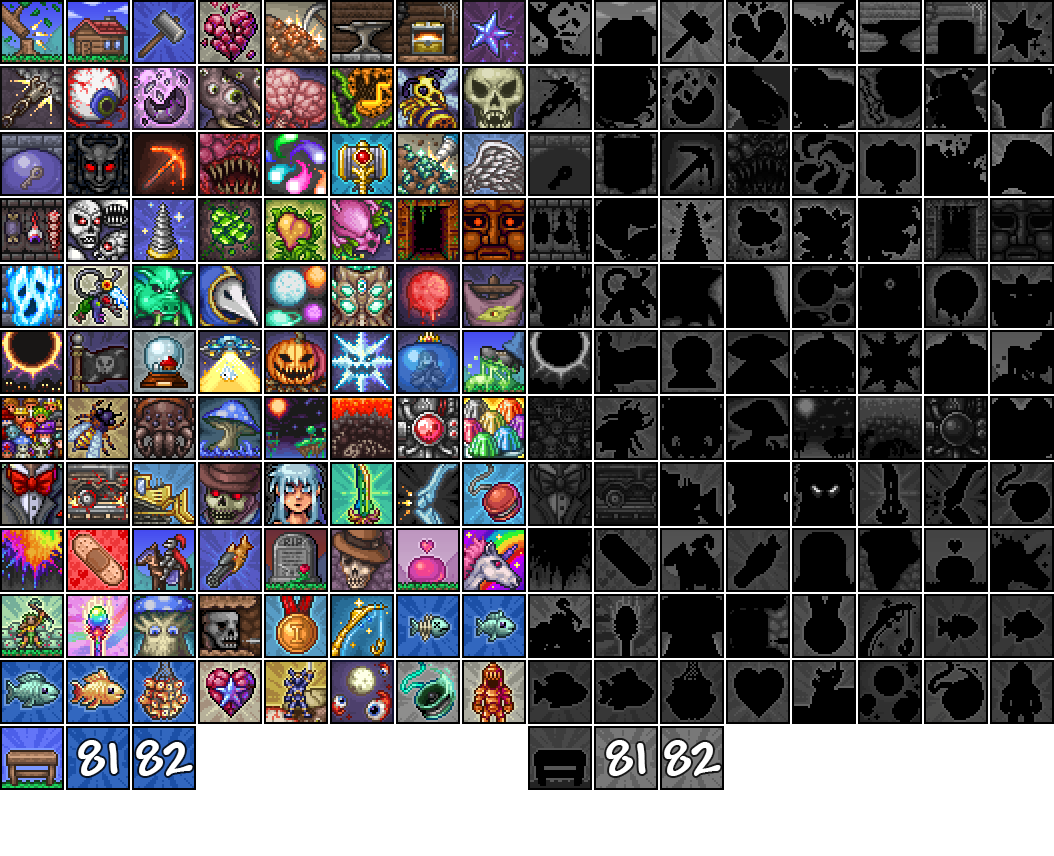
<style>
.page{position:relative;width:1054px;height:856px;background:#000000}
.page>*{position:absolute;margin:0}
.t1{font:60px "Andy-Bold";color:#ffffff}
</style>
<div class="page">
<p class="t1" style="left:78px;top:740px;width:40px;height:36px">81</p>
<p class="t1" style="left:136px;top:740px;width:57px;height:36px">82</p>
<p class="t1" style="left:606px;top:740px;width:40px;height:36px">81</p>
<p class="t1" style="left:664px;top:740px;width:57px;height:36px">82</p>
</div>
